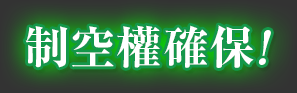
<style>
.page{position:relative;width:297px;height:93px}
.page>*{position:absolute;margin:0}
.t1{font:45px "RyuminPro-ExBold";letter-spacing:0.025em;color:#ffffff}
.t2{font:45px "RyuminPro-ExBold";letter-spacing:0.025em;color:#ffffff;font-style:italic}
</style>
<div class="page">
<p class="t1" style="left:25px;top:25px;width:246px;height:43px">制空權確保<span class="t2">!</span></p>
</div>
